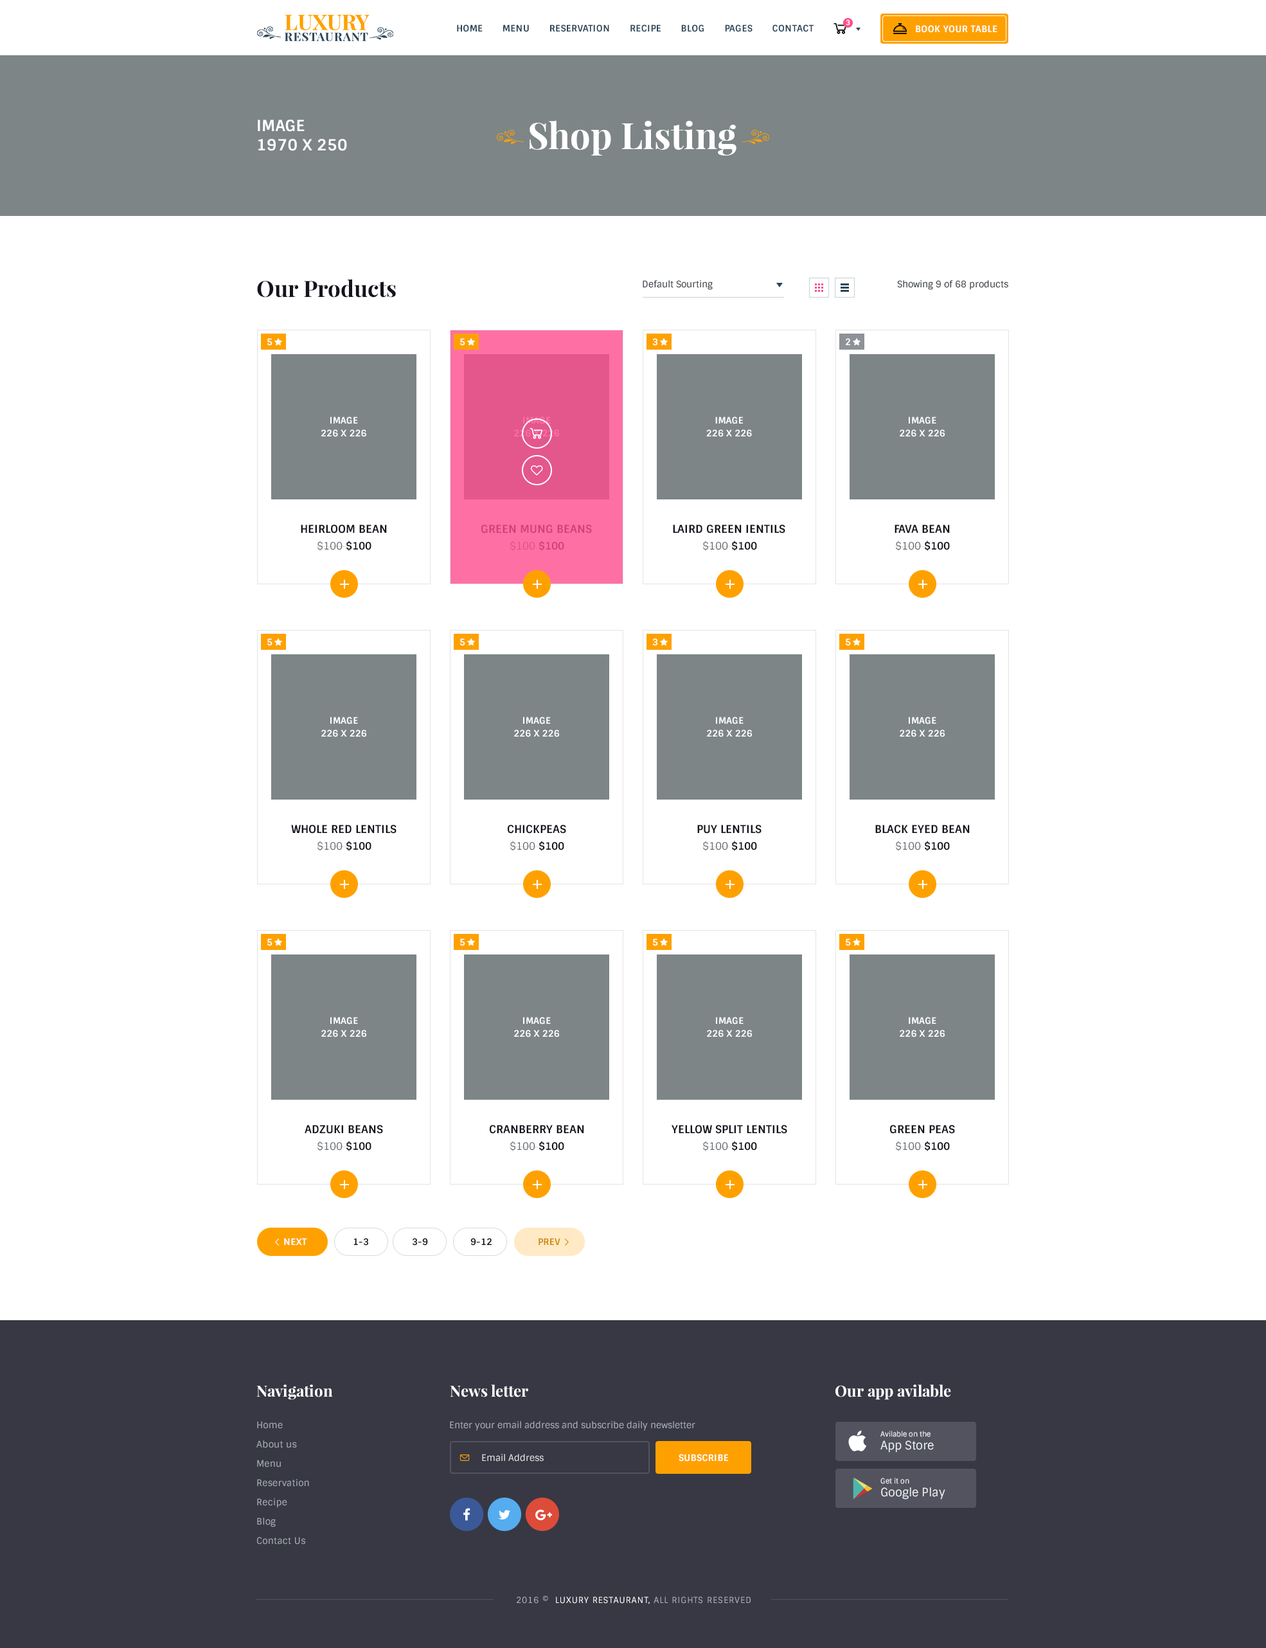
<style>
.page{position:relative;width:1266px;height:1648px;background:#ffffff}
.page>*{position:absolute;margin:0}
.t1{font:9px "Sintony-Bold";letter-spacing:0.025em;color:#2c465a;text-transform:uppercase}
.t2{font:7.1px "Sintony-Bold";letter-spacing:0.025em;color:#ffffff;text-transform:uppercase}
.t3{font:9px "Sintony-Bold";letter-spacing:0.025em;color:#ffffff;text-transform:uppercase}
.t4{font:15.4px/19.3px "Sintony-Bold";letter-spacing:0.005em;color:#ffffff;text-transform:uppercase}
.t5{font:36px "PlayfairDisplay-Bold";color:#ffffff}
.t6{font:22.5px "PlayfairDisplay-Bold";color:#14141d}
.t7{font:9px "Sintony";color:#363d43}
.t8{font:9px "Sintony-Bold";color:#ffffff;text-transform:uppercase}
.t9{font:9px/12.9px "Sintony-Bold";letter-spacing:0.005em;color:#ffffff;text-transform:uppercase}
.t10{font:9px/12.9px "Sintony-Bold";letter-spacing:0.005em;color:#fe70a4;text-transform:uppercase}
.t11{font:10.9px "Sintony-Bold";color:#14141d;text-transform:uppercase}
.t12{font:10.9px "Sintony-Bold";color:#cf4177;text-transform:uppercase}
.t13{font:10.3px "Sintony";color:#5c6369}
.t14{font:10.3px "Sintony-Bold";color:#14141d}
.t15{font:10.3px "Sintony";color:#cf4177}
.t16{font:10.3px "Sintony-Bold";color:#cf4177}
.t17{font:9px "Sintony-Bold";color:#14141d}
.t18{font:9px "Sintony-Bold";letter-spacing:0.025em;color:#d38a0c;text-transform:uppercase}
.t19{font:15.4px "PlayfairDisplay-Bold";color:#ffffff}
.t20{font:9px/19.3px "Sintony";letter-spacing:0.025em;color:#adb2b7}
.t21{font:9px "Sintony";color:#adb2b7}
.t22{font:7.1px/12.9px "Sintony";color:#edf1f3}
.t23{font:11.6px/12.9px "Sintony";color:#edf1f3}
.t24{font:9px "Sintony";color:#e6e9eb}
.t25{font:8.4px "Sintony";letter-spacing:0.075em;color:#adb2b7;text-transform:uppercase}
.t26{font:8.4px "Sintony";letter-spacing:0.075em;color:#ffffff;text-transform:uppercase}
</style>
<div class="page">
<p class="t1" style="left:457px;top:24px;width:357px;height:8px">Home       menu       reservation       recipe       blog       Pages       contact</p>
<p class="t2" style="left:846px;top:19px;width:5px;height:7px">3</p>
<p class="t3" style="left:916px;top:25px;width:82px;height:8px">Book your table</p>
<p class="t4" style="left:258px;top:120px;width:89px;height:31px">Image<br>1970 x 250</p>
<p class="t5" style="left:530px;top:120px;width:207px;height:36px">Shop Listing</p>
<p class="t6" style="left:257px;top:279px;width:139px;height:19px">Our Products</p>
<p class="t7" style="left:643px;top:280px;width:70px;height:10px">Default Sourting</p>
<p class="t7" style="left:897px;top:280px;width:112px;height:10px">Showing 9 of 68 products</p>
<p class="t8" style="left:267px;top:338px;width:6px;height:8px">5</p>
<p class="t8" style="left:460px;top:338px;width:5px;height:8px">5</p>
<p class="t8" style="left:652px;top:338px;width:6px;height:8px">3</p>
<p class="t8" style="left:846px;top:338px;width:5px;height:7px">2</p>
<p class="t9" style="left:321px;top:417px;width:45px;height:20px;text-align:center">Image<br>226 x 226</p>
<p class="t10" style="left:514px;top:417px;width:45px;height:20px;text-align:center">Image<br>226 x 226</p>
<p class="t9" style="left:706px;top:417px;width:46px;height:20px;text-align:center">Image<br>226 x 226</p>
<p class="t9" style="left:900px;top:417px;width:45px;height:20px;text-align:center">Image<br>226 x 226</p>
<p class="t11" style="left:301px;top:525px;width:86px;height:9px">Heirloom bean</p>
<p class="t12" style="left:482px;top:525px;width:110px;height:9px">green mung beans</p>
<p class="t11" style="left:673px;top:525px;width:113px;height:9px">laird green ientils</p>
<p class="t11" style="left:895px;top:525px;width:55px;height:8px">Fava bean</p>
<p class="t13" style="left:317px;top:541px;width:55px;height:10px">$100 <span class="t14">$100</span></p>
<p class="t15" style="left:510px;top:541px;width:54px;height:10px">$100 <span class="t16">$100</span></p>
<p class="t13" style="left:703px;top:541px;width:54px;height:10px">$100 <span class="t14">$100</span></p>
<p class="t13" style="left:896px;top:541px;width:54px;height:10px">$100 <span class="t14">$100</span></p>
<p class="t8" style="left:267px;top:638px;width:6px;height:8px">5</p>
<p class="t8" style="left:460px;top:638px;width:5px;height:8px">5</p>
<p class="t8" style="left:652px;top:638px;width:6px;height:8px">3</p>
<p class="t8" style="left:846px;top:638px;width:5px;height:8px">5</p>
<p class="t9" style="left:321px;top:717px;width:45px;height:20px;text-align:center">Image<br>226 x 226</p>
<p class="t9" style="left:514px;top:717px;width:45px;height:20px;text-align:center">Image<br>226 x 226</p>
<p class="t9" style="left:707px;top:717px;width:45px;height:20px;text-align:center">Image<br>226 x 226</p>
<p class="t9" style="left:900px;top:717px;width:45px;height:20px;text-align:center">Image<br>226 x 226</p>
<p class="t11" style="left:291px;top:825px;width:106px;height:9px">whole red lentils</p>
<p class="t11" style="left:508px;top:825px;width:58px;height:9px">chickpeas</p>
<p class="t11" style="left:698px;top:825px;width:64px;height:9px">puy lentils</p>
<p class="t11" style="left:876px;top:825px;width:94px;height:9px">black eyed bean</p>
<p class="t13" style="left:317px;top:841px;width:55px;height:10px">$100 <span class="t14">$100</span></p>
<p class="t13" style="left:510px;top:841px;width:54px;height:10px">$100 <span class="t14">$100</span></p>
<p class="t13" style="left:703px;top:841px;width:54px;height:10px">$100 <span class="t14">$100</span></p>
<p class="t13" style="left:896px;top:841px;width:54px;height:10px">$100 <span class="t14">$100</span></p>
<p class="t8" style="left:267px;top:939px;width:6px;height:7px">5</p>
<p class="t8" style="left:460px;top:939px;width:5px;height:7px">5</p>
<p class="t8" style="left:653px;top:939px;width:5px;height:7px">5</p>
<p class="t8" style="left:846px;top:939px;width:5px;height:7px">5</p>
<p class="t9" style="left:321px;top:1017px;width:45px;height:21px;text-align:center">Image<br>226 x 226</p>
<p class="t9" style="left:514px;top:1017px;width:45px;height:21px;text-align:center">Image<br>226 x 226</p>
<p class="t9" style="left:707px;top:1017px;width:45px;height:21px;text-align:center">Image<br>226 x 226</p>
<p class="t9" style="left:900px;top:1017px;width:45px;height:21px;text-align:center">Image<br>226 x 226</p>
<p class="t11" style="left:305px;top:1125px;width:78px;height:9px">adzuki beans</p>
<p class="t11" style="left:490px;top:1125px;width:94px;height:9px">cranberry bean</p>
<p class="t11" style="left:672px;top:1125px;width:116px;height:9px">Yellow split lentils</p>
<p class="t11" style="left:890px;top:1125px;width:65px;height:9px">green peas</p>
<p class="t13" style="left:317px;top:1141px;width:55px;height:10px">$100 <span class="t14">$100</span></p>
<p class="t13" style="left:510px;top:1141px;width:54px;height:10px">$100 <span class="t14">$100</span></p>
<p class="t13" style="left:703px;top:1141px;width:54px;height:10px">$100 <span class="t14">$100</span></p>
<p class="t13" style="left:896px;top:1141px;width:54px;height:10px">$100 <span class="t14">$100</span></p>
<p class="t3" style="left:284px;top:1238px;width:23px;height:7px">Next</p>
<p class="t17" style="left:354px;top:1238px;width:14px;height:8px">1-3</p>
<p class="t17" style="left:412px;top:1238px;width:16px;height:8px">3-9</p>
<p class="t17" style="left:471px;top:1238px;width:21px;height:8px">9-12</p>
<p class="t18" style="left:539px;top:1238px;width:22px;height:7px">prev</p>
<p class="t19" style="left:256px;top:1385px;width:77px;height:15px">Navigation</p>
<p class="t19" style="left:450px;top:1385px;width:78px;height:13px">News letter</p>
<p class="t19" style="left:836px;top:1385px;width:115px;height:15px">Our app avilable</p>
<p class="t20" style="left:256px;top:1421px;width:53px;height:124px">Home<br>About us<br>Menu<br>Reservation<br>Recipe<br>Blog<br>Contact Us</p>
<p class="t21" style="left:450px;top:1421px;width:246px;height:10px">Enter your email address and subscribe daily newsletter</p>
<p class="t22" style="left:881px;top:1431px;width:53px;height:22px">Avilable on the<br><span class="t23">App Store</span></p>
<p class="t24" style="left:482px;top:1454px;width:62px;height:8px">Email Address</p>
<p class="t3" style="left:679px;top:1454px;width:49px;height:8px">Subscribe</p>
<p class="t23" style="left:881px;top:1478px;width:65px;height:22px"><span class="t22">Get it on<br></span>Google Play</p>
<p class="t25" style="left:517px;top:1596px;width:234px;height:9px">2016 ©  <span class="t26">Luxury RestaurAnt,</span> All rights reserved</p>
</div>
